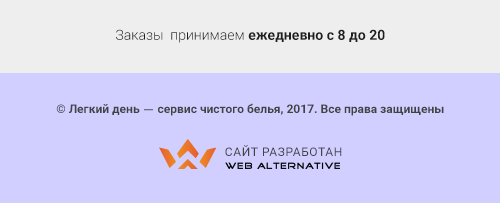
<style>
.page{position:relative;width:500px;height:203px;background:#d0cfff}
.page>*{position:absolute;margin:0}
.t1{font:14px "Roboto-Bold";color:#211d1e}
.t2{font:14px "Roboto-Light";color:#211d1e}
.t3{font:12px "Roboto-Bold";color:#424242}
.t4{font:12px "HelveticaNeue";color:#424242}
.t5{font:12px "Roboto-Regular";letter-spacing:0.05em;color:#424242;text-transform:uppercase}
</style>
<div class="page">
<p class="t1" style="left:116px;top:29px;width:269px;height:14px"><span class="t2">Заказы  принимаем </span>ежедневно с 8 до 20</p>
<p class="t3" style="left:56px;top:103px;width:388px;height:13px">© Легкий день <span class="t4">—</span> сервис чистого белья, 2017. Все права защищены</p>
<p class="t5" style="left:225px;top:145px;width:117px;height:11px">Сайт разработан</p>
</div>
